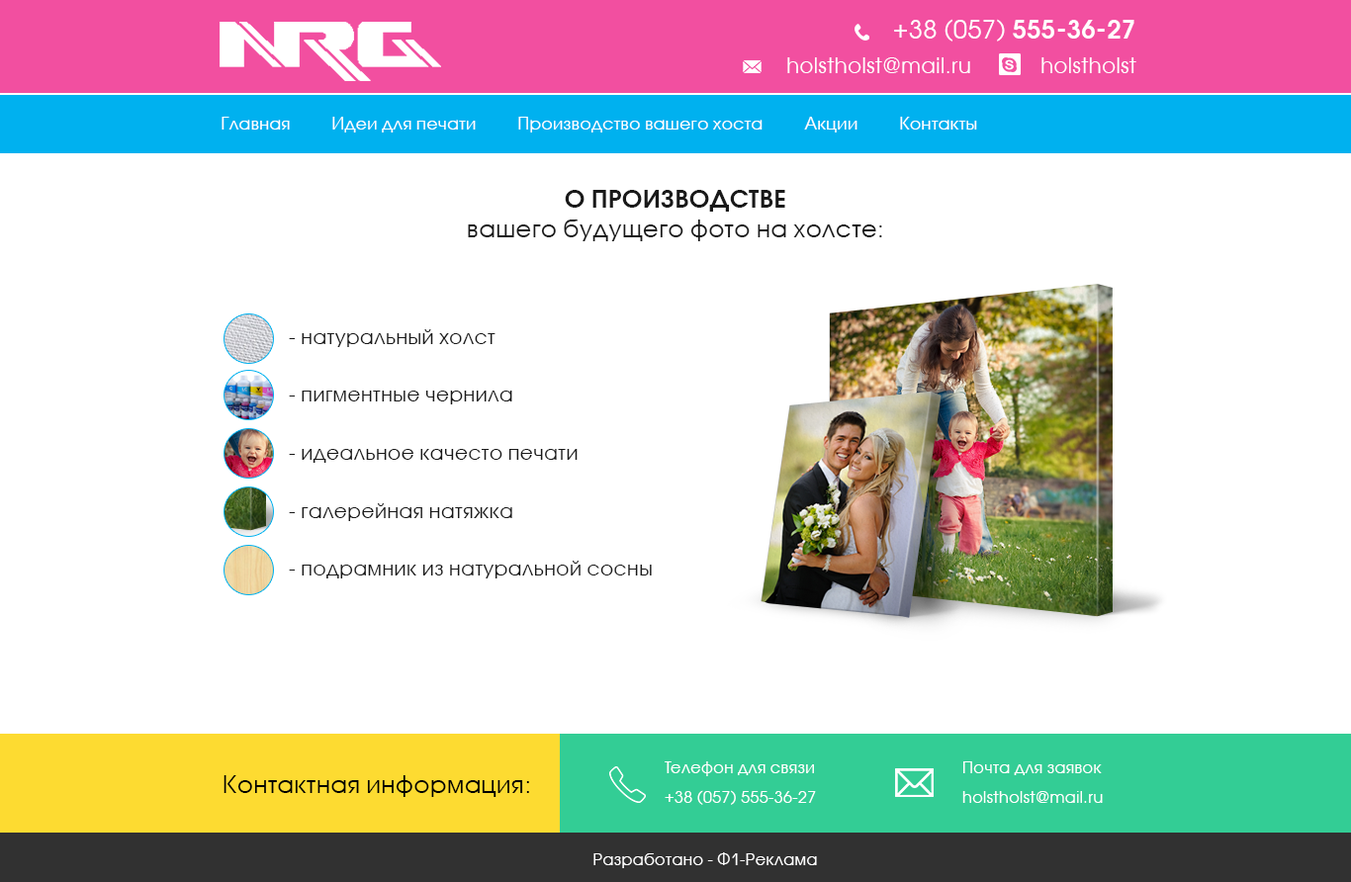
<style>
.page{position:relative;width:1351px;height:882px;background:#ffffff}
.page>*{position:absolute;margin:0}
.t1{font:24.7px "AvantGardeCTT";letter-spacing:0.025em;color:#ffffff}
.t2{font:24.7px "AvantGardeCTT-Bold";letter-spacing:0.025em;color:#ffffff}
.t3{font:20.8px "AvantGardeCTT";letter-spacing:0.025em;color:#ffffff}
.t4{font:16.8px "AvantGardeCTT";letter-spacing:0.025em;color:#ffffff}
.t5{font:23.7px/29.7px "AvantGardeCTT";letter-spacing:0.025em;color:#191919}
.t6{font:23.7px/29.7px "AvantGardeCTT-Bold";letter-spacing:0.025em;color:#191919}
.t7{font:19.8px "AvantGardeCTT";letter-spacing:0.025em;color:#191919}
.t8{font:15.8px/29.7px "AvantGardeCTT";letter-spacing:0.025em;color:#ffffff}
.t9{font:23.7px "AvantGardeCTT";letter-spacing:0.025em;color:#000000}
.t10{font:15.8px "AvantGardeCTT";letter-spacing:0.025em;color:#ffffff}
</style>
<div class="page">
<p class="t1" style="left:894px;top:19px;width:241px;height:23px">+38 (057) <span class="t2">555-36-27</span></p>
<p class="t3" style="left:787px;top:57px;width:183px;height:16px">holstholst@mail.ru</p>
<p class="t3" style="left:1042px;top:57px;width:95px;height:16px">holstholst</p>
<p class="t4" style="left:222px;top:117px;width:68px;height:13px">Главная</p>
<p class="t4" style="left:332px;top:117px;width:144px;height:16px">Идеи для печати</p>
<p class="t4" style="left:518px;top:117px;width:245px;height:16px">Производство вашего хоста</p>
<p class="t4" style="left:804px;top:117px;width:54px;height:16px">Акции</p>
<p class="t4" style="left:900px;top:117px;width:77px;height:13px">Контакты</p>
<p class="t5" style="left:468px;top:190px;width:414px;height:51px;text-align:justify"><span class="t6">О ПРОИЗВОДСТВЕ <br></span>вашего будущего фото на холсте:</p>
<p class="t7" style="left:289px;top:329px;width:207px;height:18px">- натуральный холст</p>
<p class="t7" style="left:289px;top:391px;width:223px;height:14px">- пигментные чернила</p>
<p class="t7" style="left:289px;top:449px;width:289px;height:14px">- идеальное качесто печати</p>
<p class="t7" style="left:289px;top:504px;width:223px;height:17px">- галерейная натяжка</p>
<p class="t7" style="left:289px;top:561px;width:363px;height:18px">- подрамник из натуральной сосны</p>
<p class="t8" style="left:665px;top:762px;width:151px;height:43px">Телефон для связи<br>+38 (057) 555-36-27</p>
<p class="t8" style="left:963px;top:762px;width:140px;height:41px">Почта для заявок<br>holstholst@mail.ru</p>
<p class="t9" style="left:224px;top:776px;width:305px;height:21px">Контактная информация:</p>
<p class="t10" style="left:594px;top:853px;width:223px;height:16px">Разработано - Ф1-Реклама</p>
</div>
